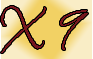
<style>
.page{position:relative;width:93px;height:59px;background:#f2d164}
.page>*{position:absolute;margin:0}
.t1{font:60px "BilboSwashCaps-Regular";color:#75161e}
</style>
<div class="page">
<p class="t1" style="left:1px;top:6px;width:45px;height:47px">X</p>
<p class="t1" style="left:60px;top:10px;width:28px;height:40px">9</p>
</div>
